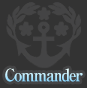
<style>
.page{position:relative;width:87px;height:88px;background:#333333}
.page>*{position:absolute;margin:0}
.t1{font:17px "RyuminPro-ExBold";letter-spacing:-0.08em;scale:0.9 1}
</style>
<div class="page">
<p class="t1" style="left:5px;top:68px;width:78px;height:14px">Commander</p>
</div>
